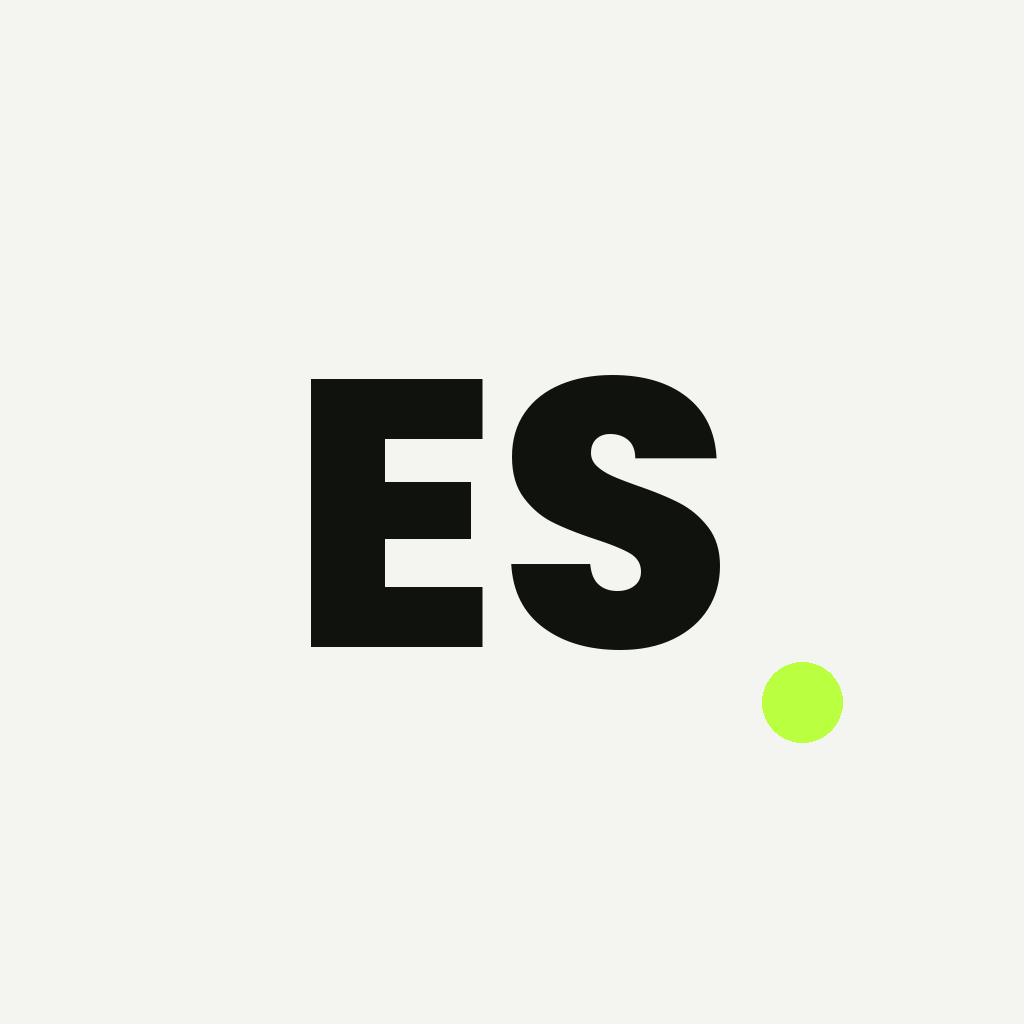
<style>
.page{position:relative;width:1024px;height:1024px;background:#f4f5f0}
.page>*{position:absolute;margin:0}
.t1{font:380px "Poppins-ExtraBold";color:#10120e}
</style>
<div class="page">
<p class="t1" style="left:311px;top:375px;width:409px;height:275px">ES</p>
</div>
